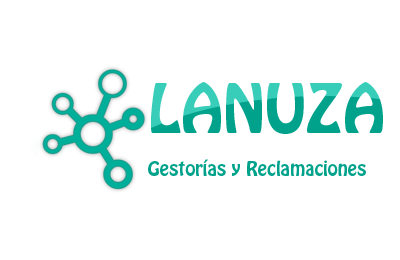
<style>
.page{position:relative;width:400px;height:260px;background:#ffffff}
.page>*{position:absolute;margin:0}
.t1{font:18px "HoboStd"}
.t2{font:60px "HoboStd"}
</style>
<div class="page">
<p class="t1" style="left:148px;top:82px;width:235px;height:94px"><span class="t2">LANUZA<br></span><br>Gestorías y Reclamaciones</p>
</div>
